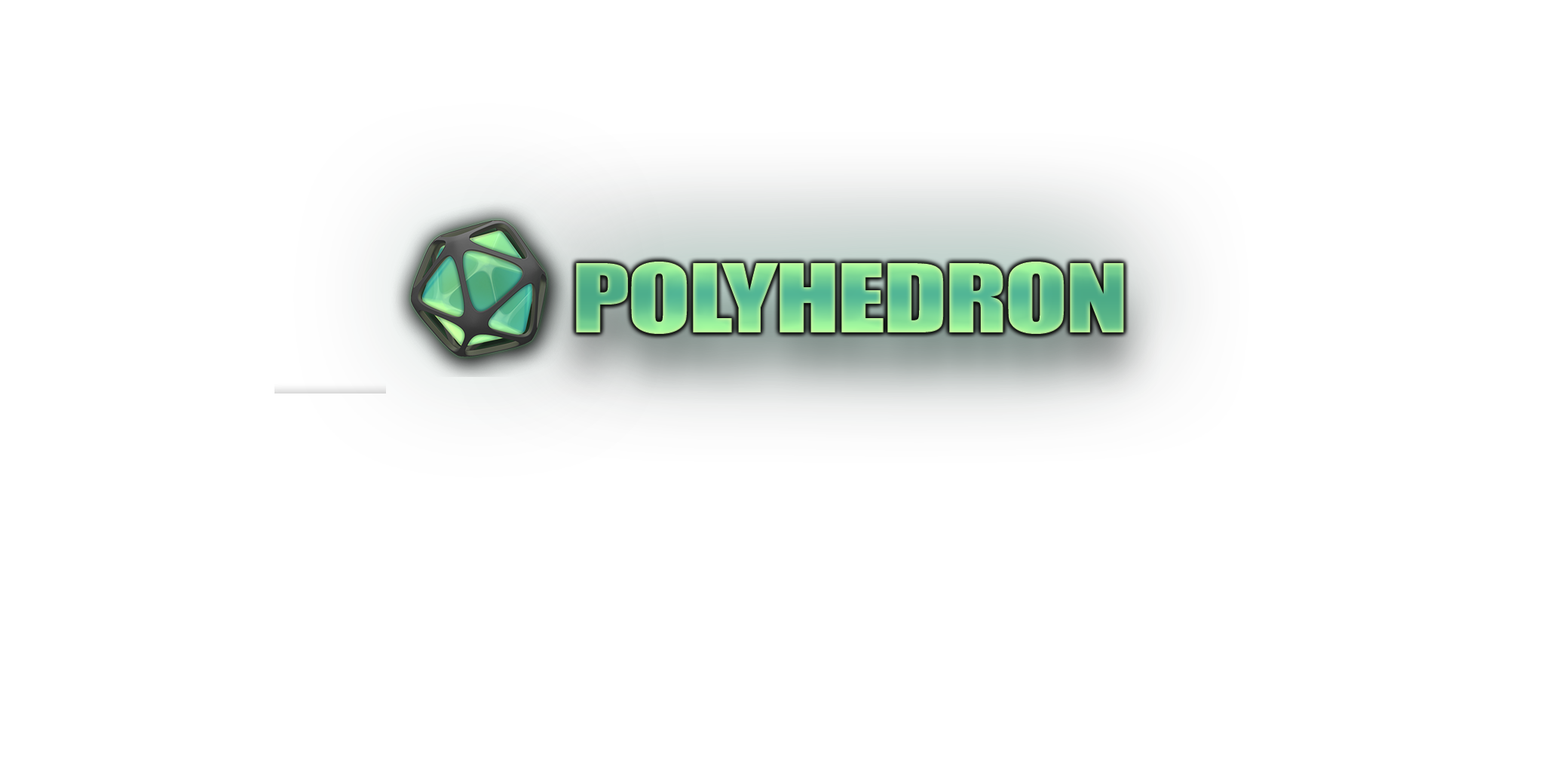
<style>
.page{position:relative;width:1544px;height:772px;background:#ffffff}
.page>*{position:absolute;margin:0}
.t1{font:88.5px "Impact";letter-spacing:-0.025em;scale:1.32 1}
</style>
<div class="page">
<p class="t1" style="left:576px;top:262px;width:548px;height:72px">POLYHEDRON</p>
<p class="t1" style="left:576px;top:262px;width:548px;height:72px">POLYHEDRON</p>
</div>
